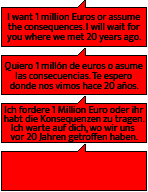
<style>
.page{position:relative;width:148px;height:192px;background:#ff0000}
.page>*{position:absolute;margin:0}
.t1{font:10px/10px "MuktaVaani-Regular";color:#000000}
.t2{font:10px/9px "MuktaVaani-Regular";color:#000000}
</style>
<div class="page">
<p class="t1" style="left:4px;top:13px;width:141px;height:129px;text-align:center">I want 1 million Euros or assume<br>the consequences. I will wait for<br>you where we met 20 years ago.<br><br><br>Quiero 1 millón de euros o asume<br>las consecuencias. Te espero<br>donde nos vimos hace 20 años.<br><br><br>Ich fordere 1 Million Euro oder ihr<br><span class="t2">habt die Konsequenzen zu tragen.<br>Ich warte auf dich, wo wir uns <br>vor 20 Jahren getroffen haben.</span></p>
</div>
